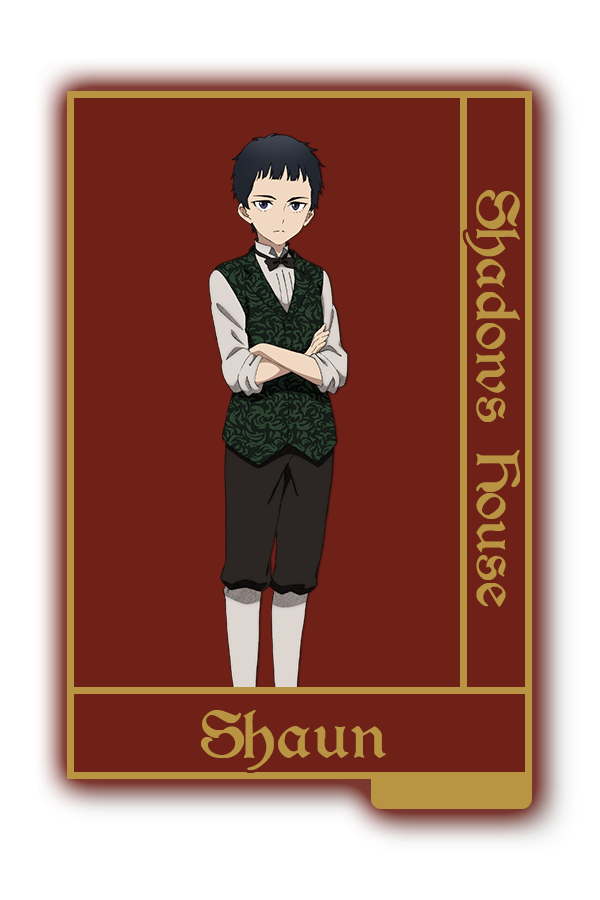
<style>
.page{position:relative;width:600px;height:900px;background:#6f2117}
.page>*{position:absolute;margin:0}
.t1{font:67.9px "Augusta-Regular";color:#b89443}
.t2{font:75px "Augusta-Regular";color:#b89443}
</style>
<div class="page">
<p class="t1" style="left:465px;top:190px;width:55px;height:417px;rotate:90deg">Shadows House</p>
<p class="t2" style="left:201px;top:710px;width:185px;height:60px">Shaun</p>
</div>
